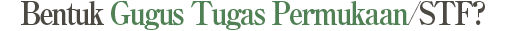
<style>
.page{position:relative;width:505px;height:31px;background:#ffffff}
.page>*{position:absolute;margin:0}
.t1{font:32px "RyuminPro-ExBold";letter-spacing:-0.08em;color:#508154;scale:0.9 1}
.t2{font:32px "RyuminPro-ExBold";letter-spacing:-0.08em;color:#4c4842;scale:0.9 1}
</style>
<div class="page">
<p class="t1" style="left:21px;top:0px;width:464px;height:30px"><span class="t2">Bentuk </span>Gugus Tugas Permukaan<span class="t2">/STF?</span></p>
</div>
